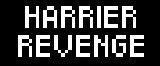
<style>
.page{position:relative;width:160px;height:66px;background:#000000}
.page>*{position:absolute;margin:0}
.t1{font:18px "Pixeled";color:#ffffff}
</style>
<div class="page">
<p class="t1" style="left:25px;top:6px;width:111px;height:22px">HARRIER</p>
<p class="t1" style="left:18px;top:35px;width:126px;height:22px">REVENGE</p>
</div>
